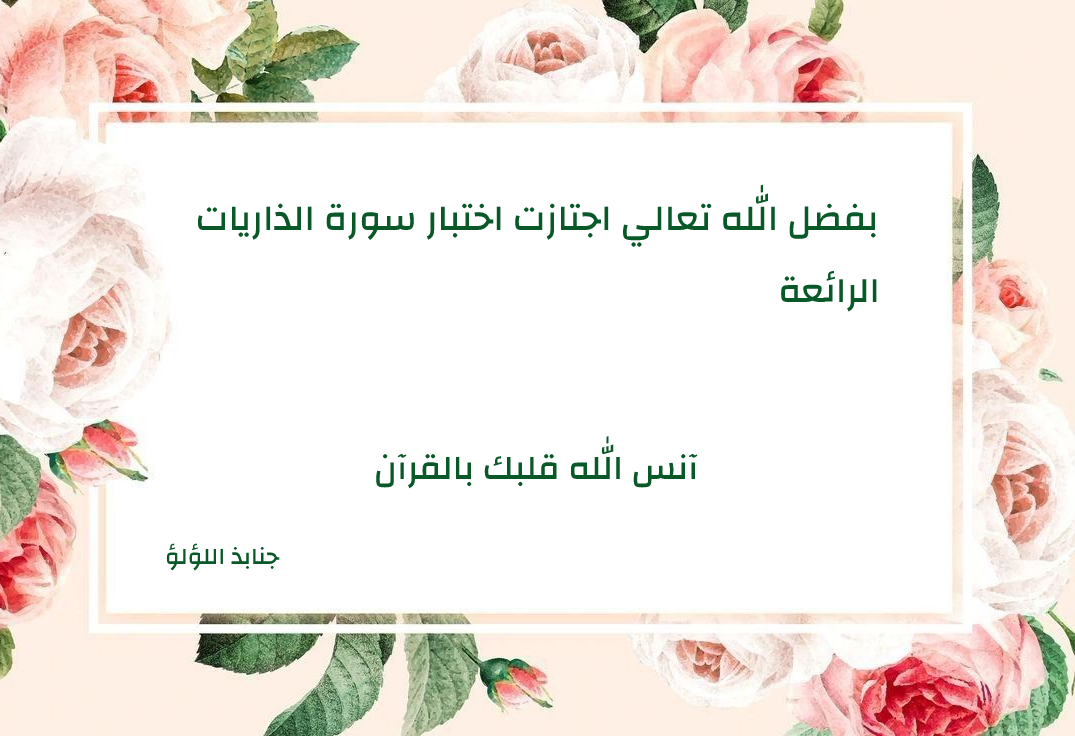
<style>
.page{position:relative;width:1075px;height:736px;background:#ffffff}
.page>*{position:absolute;margin:0}
.t1{font:37px "Changa-Medium";color:#095828}
.t2{font:36px "Changa-Medium";color:#095828}
.t3{font:35px "Changa-Medium";color:#095828}
.t4{font:24px "Changa-Medium";color:#095828}
</style>
<div class="page">
<p class="t1" style="left:197px;top:184px;width:679px;height:63px">بفضل الله تعالي اجتازت اختبار سورة الذاريات</p>
<p class="t2" style="left:781px;top:270px;width:96px;height:42px">الرائعة</p>
<p class="t3" style="left:376px;top:436px;width:322px;height:53px">آنس الله قلبك بالقرآن</p>
<p class="t4" style="left:166px;top:543px;width:114px;height:28px">جنابذ اللؤلؤ</p>
</div>
